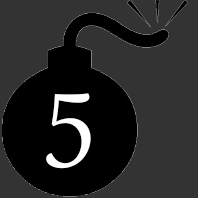
<style>
.page{position:relative;width:198px;height:198px;background:#333333}
.page>*{position:absolute;margin:0}
.t1{font:140px "Gabriola";color:#ffffff}
</style>
<div class="page">
<p class="t1" style="left:46px;top:93px;width:45px;height:76px">5</p>
</div>
